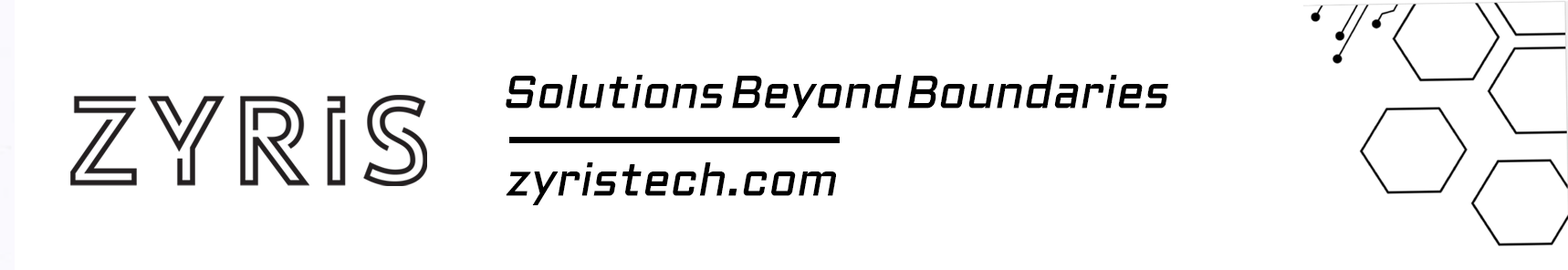
<style>
.page{position:relative;width:1568px;height:270px;background:#ffffff}
.page>*{position:absolute;margin:0}
.t1{font:45.6px "Aldrich-Regular";letter-spacing:-0.12em;color:#000000;font-weight:bold;font-style:italic}
</style>
<div class="page">
<p class="t1" style="left:506px;top:75px;width:662px;height:43px">Solutions Beyond Boundaries</p>
<p class="t1" style="left:506px;top:162px;width:330px;height:43px">zyristech.com</p>
</div>
